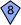
<style>
.page{position:relative;width:21px;height:25px;background:#ffffff}
.page>*{position:absolute;margin:0}
.t1{font:12px "Aller";color:#030000}
</style>
<div class="page">
<p class="t1" style="left:7px;top:5px;width:7px;height:10px">8</p>
</div>
